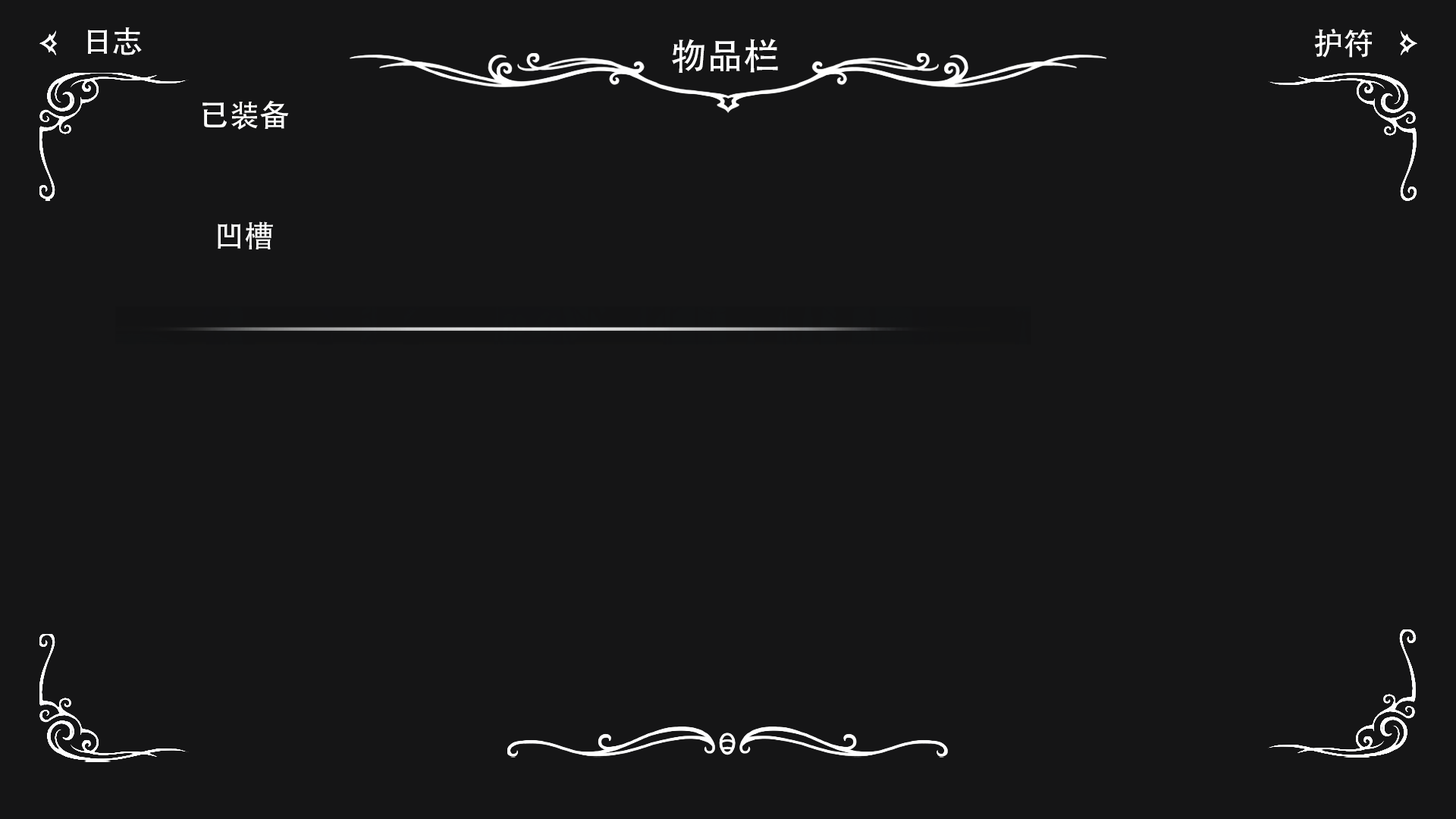
<style>
.page{position:relative;width:1456px;height:819px;background:#151516}
.page>*{position:absolute;margin:0}
.t1{font:30.3px "AdobeHeitiStd-Regular";color:#ffffff}
.t2{font:36.4px "AdobeHeitiStd-Regular";color:#ffffff}
</style>
<div class="page">
<p class="t1" style="left:88px;top:27px;width:54px;height:28px">日志</p>
<p class="t1" style="left:1314px;top:29px;width:58px;height:29px">护符</p>
<p class="t2" style="left:672px;top:39px;width:106px;height:34px">物品栏</p>
<p class="t1" style="left:202px;top:100px;width:87px;height:30px">已装备</p>
<p class="t1" style="left:218px;top:221px;width:55px;height:28px">凹槽</p>
</div>
